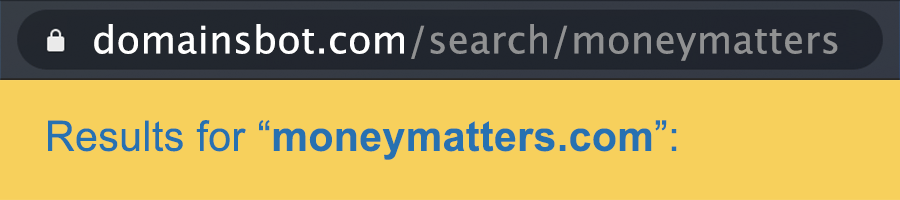
<style>
.page{position:relative;width:900px;height:200px;background:#f7d05c}
.page>*{position:absolute;margin:0}
.t1{font:38px "LucidaGrande";letter-spacing:0.01em;color:#909192}
.t2{font:38px "LucidaGrande";letter-spacing:0.01em;color:#ffffff}
.t3{font:42px "Arial-BoldMT";letter-spacing:0.01em;color:#2771b1}
.t4{font:42px "ArialMT";letter-spacing:0.01em;color:#2771b1}
</style>
<div class="page">
<p class="t1" style="left:94px;top:24px;width:744px;height:37px"><span class="t2">domainsbot.com</span>/search/moneymatters</p>
<p class="t3" style="left:48px;top:120px;width:629px;height:40px"><span class="t4">Results for “</span>moneymatters.com<span class="t4">”:</span></p>
</div>
